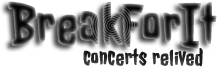
<style>
.page{position:relative;width:217px;height:72px;background:#ffffff}
.page>*{position:absolute;margin:0}
.t1{font:60px "JollyLodger";font-weight:bold}
.t2{font:24px "JollyLodger";color:#292929;font-weight:bold}
</style>
<div class="page">
<p class="t1" style="left:8px;top:1px;width:209px;height:48px">BreakForIt</p>
<p class="t2" style="left:83px;top:48px;width:120px;height:19px">concerts relived</p>
</div>
